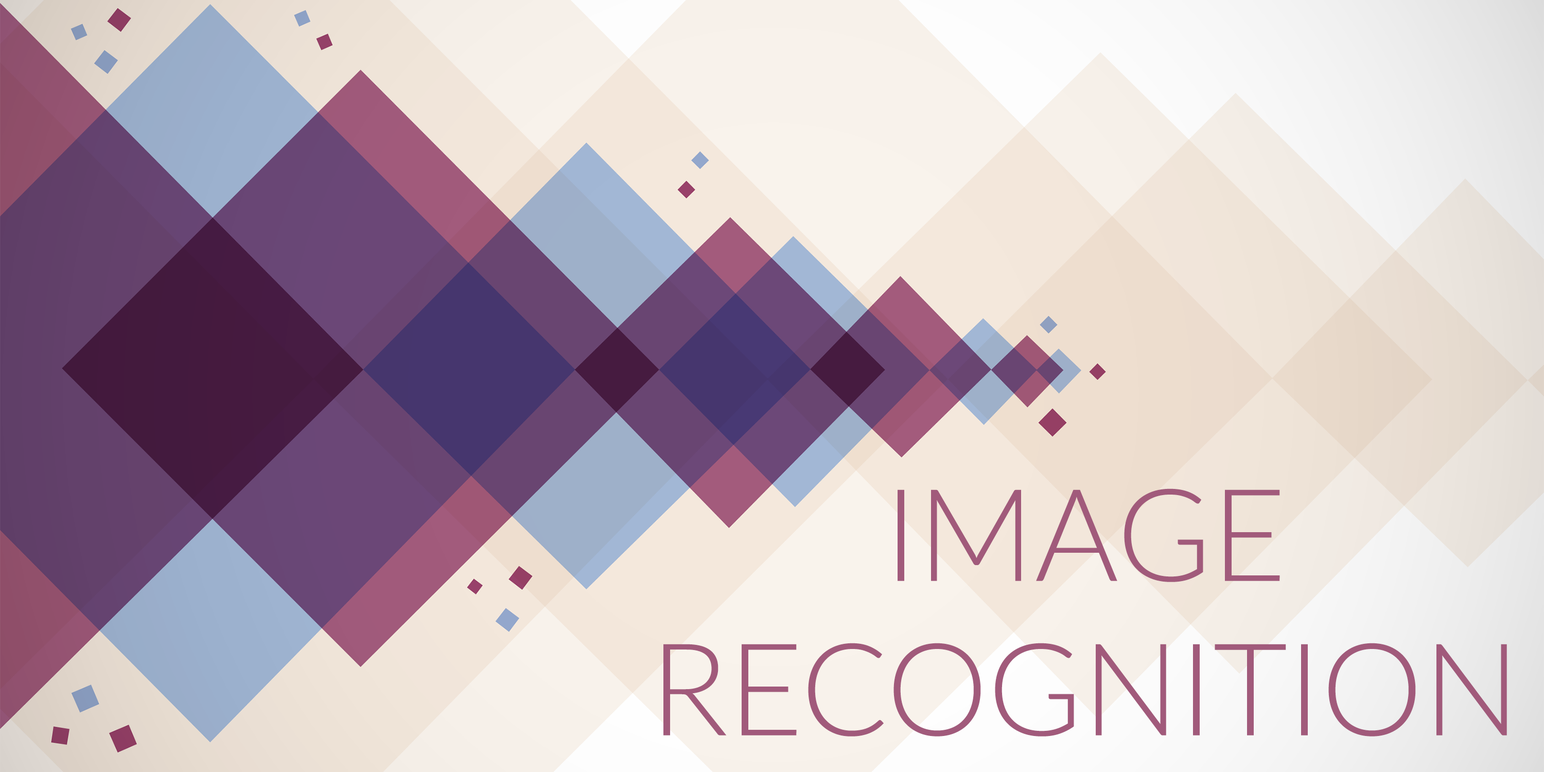
<style>
.page{position:relative;width:1544px;height:772px}
.page>*{position:absolute;margin:0}
.t1{font:128.7px "Lato-Light";color:#a15a7b;text-transform:uppercase}
</style>
<div class="page">
<p class="t1" style="left:664px;top:489px;width:843px;height:248px;text-align:center">Image<br>Recognition</p>
</div>
